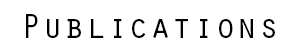
<style>
.page{position:relative;width:300px;height:50px;background:#ffffff}
.page>*{position:absolute;margin:0}
.t1{font:36px "OratorStd";color:#000000}
</style>
<div class="page">
<p class="t1" style="left:26px;top:14px;width:249px;height:24px">Publications</p>
</div>
